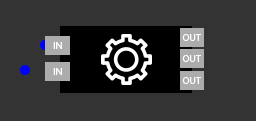
<style>
.page{position:relative;width:256px;height:121px;background:#333333}
.page>*{position:absolute;margin:0}
.t1{font:10px "MyriadPro-Regular";color:#ffffff}
</style>
<div class="page">
<p class="t1" style="left:182px;top:34px;width:19px;height:7px">OUT</p>
<p class="t1" style="left:53px;top:42px;width:9px;height:7px">IN</p>
<p class="t1" style="left:182px;top:55px;width:19px;height:7px">OUT</p>
<p class="t1" style="left:53px;top:68px;width:9px;height:7px">IN</p>
<p class="t1" style="left:182px;top:77px;width:19px;height:7px">OUT</p>
</div>
